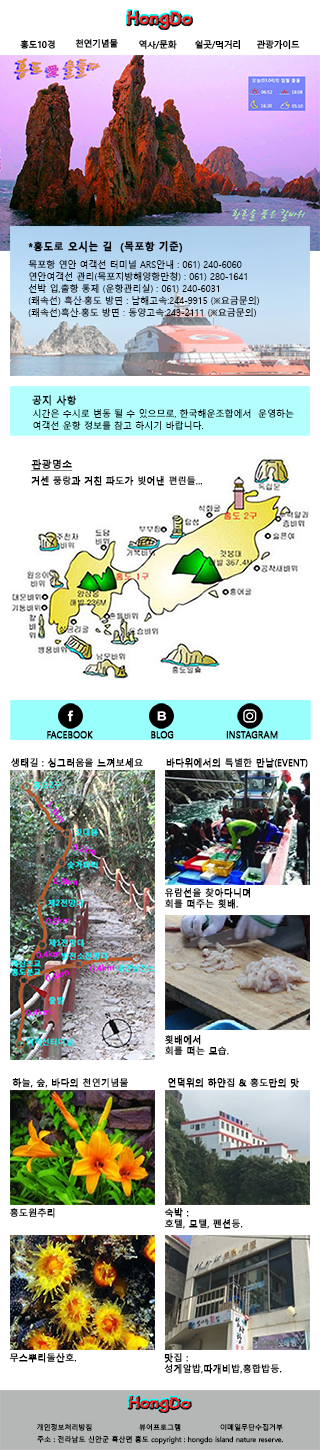
<style>
.page{position:relative;width:320px;height:1450px;background:#ffffff}
.page>*{position:absolute;margin:0}
.t1{font:9px "MalgunGothicBold";letter-spacing:-0.05em;color:#000000}
.t2{font:10px "MalgunGothicBold";color:#000000;font-weight:bold}
.t3{font:9px/12px "MalgunGothic";color:#000000}
.t4{font:9px/12px "MalgunGothic";color:#050505}
.t5{font:10px "MalgunGothic";color:#000000;font-weight:bold}
.t6{font:10px "MalgunGothic";color:#000000;font-weight:bold;text-decoration:underline}
.t7{font:9px "MalgunGothic";color:#000000;font-weight:bold}
.t8{font:7px "MalgunGothic";color:#020202}
</style>
<div class="page">
<p class="t1" style="left:20px;top:40px;width:35px;height:9px">홍도10경</p>
<p class="t1" style="left:75px;top:39px;width:43px;height:9px">천연기념물</p>
<p class="t1" style="left:139px;top:40px;width:38px;height:9px">역사/문화</p>
<p class="t1" style="left:195px;top:40px;width:45px;height:9px">쉴곳/먹거리</p>
<p class="t1" style="left:256px;top:40px;width:44px;height:9px">관광가이드</p>
<p class="t2" style="left:28px;top:241px;width:155px;height:12px">*홍도로 오시는 길  (목포항 기준)</p>
<p class="t3" style="left:28px;top:260px;width:231px;height:57px">목포항 연안 여객선 터미널 ARS안내 : 061) 240-6060 <br>연안여객선 관리(목포지방해양항만청) : 061) 280-1641<br>선박 입,출항 통제 (운항관리실) : 061) 240-6031<br>(쾌속선) <span class="t4">흑산·홍도 방면 : 남해고속:244-9915 (※요금문의)<br>(쾌속선)흑산·홍도 방면 : 동양고속:243-2111 (※요금문의)</span></p>
<p class="t5" style="left:32px;top:395px;width:45px;height:11px">공지 사항</p>
<p class="t3" style="left:33px;top:409px;width:261px;height:21px">시간은 수시로 변동 될 수 있으므로, 한국해운조합에서  운영하는 <br>여객선 운항 정보를 참고 하시기 바랍니다.</p>
<p class="t6" style="left:31px;top:459px;width:42px;height:12px">관광명소</p>
<p class="t7" style="left:31px;top:476px;width:171px;height:10px">거센 풍랑과 거친 파도가 빚어낸 편린들...</p>
<p class="t7" style="left:47px;top:731px;width:46px;height:8px">FACEBOOK</p>
<p class="t7" style="left:151px;top:731px;width:23px;height:8px">BLOG</p>
<p class="t7" style="left:226px;top:731px;width:52px;height:8px">INSTAGRAM</p>
<p class="t7" style="left:11px;top:758px;width:132px;height:10px">생태길 : 싱그러움을 느껴보세요</p>
<p class="t7" style="left:166px;top:758px;width:142px;height:10px">바다위에서의 특별한 만남(EVENT)</p>
<p class="t7" style="left:164px;top:888px;width:86px;height:21px">유람선을 찾아다니며 <br>회를 떠주는 횟배.</p>
<p class="t7" style="left:165px;top:1035px;width:64px;height:21px">횟배에서 <br>회를 떠는 모습.</p>
<p class="t7" style="left:12px;top:1078px;width:117px;height:10px">하늘, 숲, 바다의 천연기념물</p>
<p class="t7" style="left:168px;top:1078px;width:131px;height:10px">언덕위의 하얀집 &amp; 홍도만의 맛</p>
<p class="t7" style="left:9px;top:1208px;width:46px;height:10px">홍도원추리</p>
<p class="t7" style="left:164px;top:1208px;width:79px;height:21px">숙박 :  <br>호텔, 모텔, 펜션등.</p>
<p class="t7" style="left:9px;top:1353px;width:67px;height:10px">무스뿌리돌산호.</p>
<p class="t7" style="left:164px;top:1353px;width:118px;height:21px">맛집 :  <br>성게알밥,따개비밥,홍합밥등.</p>
<p class="t8" style="left:36px;top:1423px;width:56px;height:8px">개인정보처리방침</p>
<p class="t8" style="left:139px;top:1423px;width:42px;height:8px">뷰어프로그램</p>
<p class="t8" style="left:220px;top:1423px;width:63px;height:8px">이메일무단수집거부</p>
<p class="t8" style="left:37px;top:1435px;width:246px;height:9px">주소 : 전라남도 신안군 흑산면 홍도 copyright : hongdo island nature reserve.</p>
</div>
